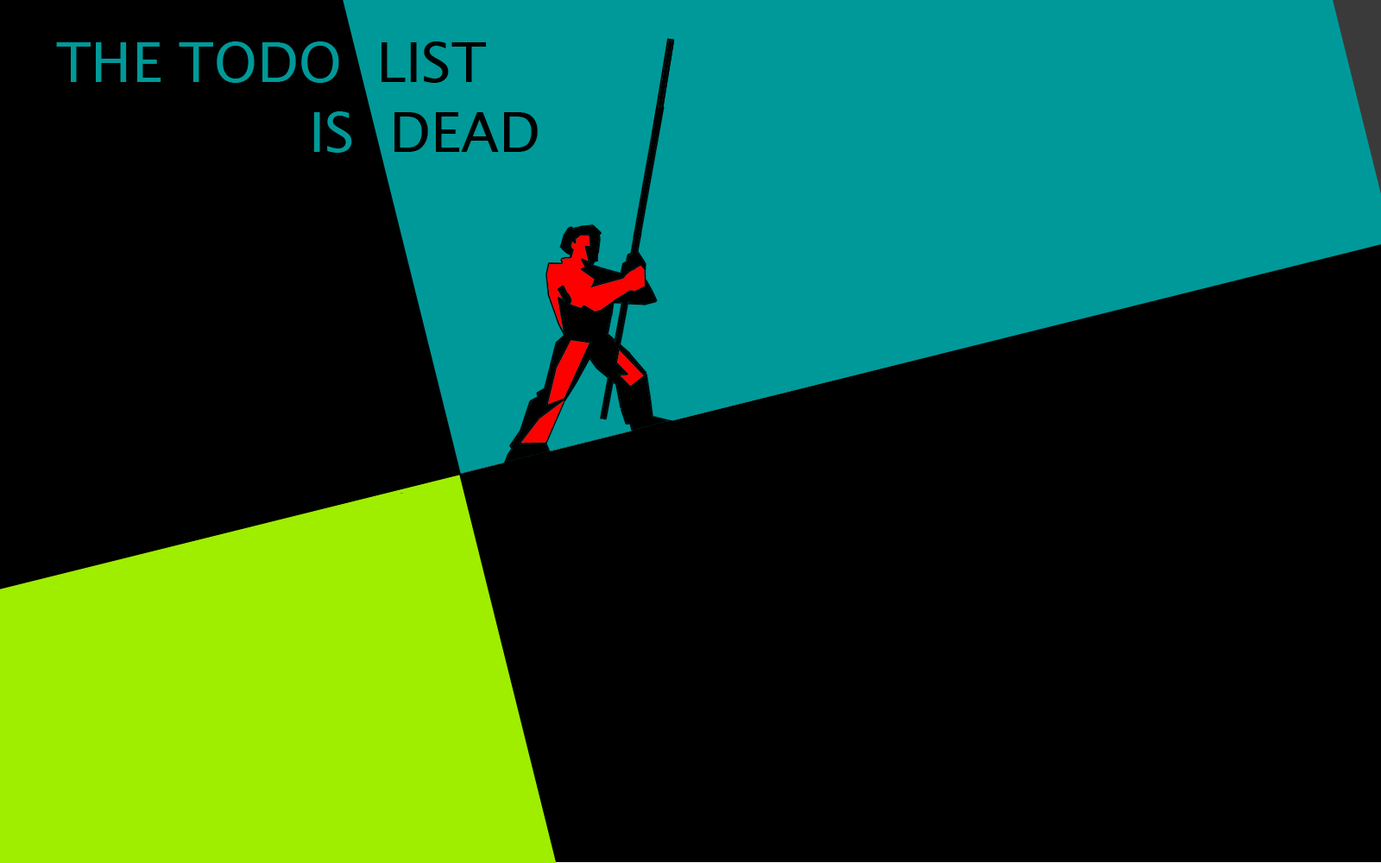
<style>
.page{position:relative;width:1381px;height:863px;background:#000000}
.page>*{position:absolute;margin:0}
.t1{font:55.3px "LucidaSansUnicode";color:#009999}
.t2{font:55.3px "LucidaSansUnicode";color:#000000}
</style>
<div class="page">
<p class="t1" style="left:56px;top:41px;width:430px;height:42px">THE TODO <span class="t2"> LIST</span></p>
<p class="t2" style="left:313px;top:111px;width:225px;height:42px"><span class="t1">IS </span> DEAD</p>
</div>
